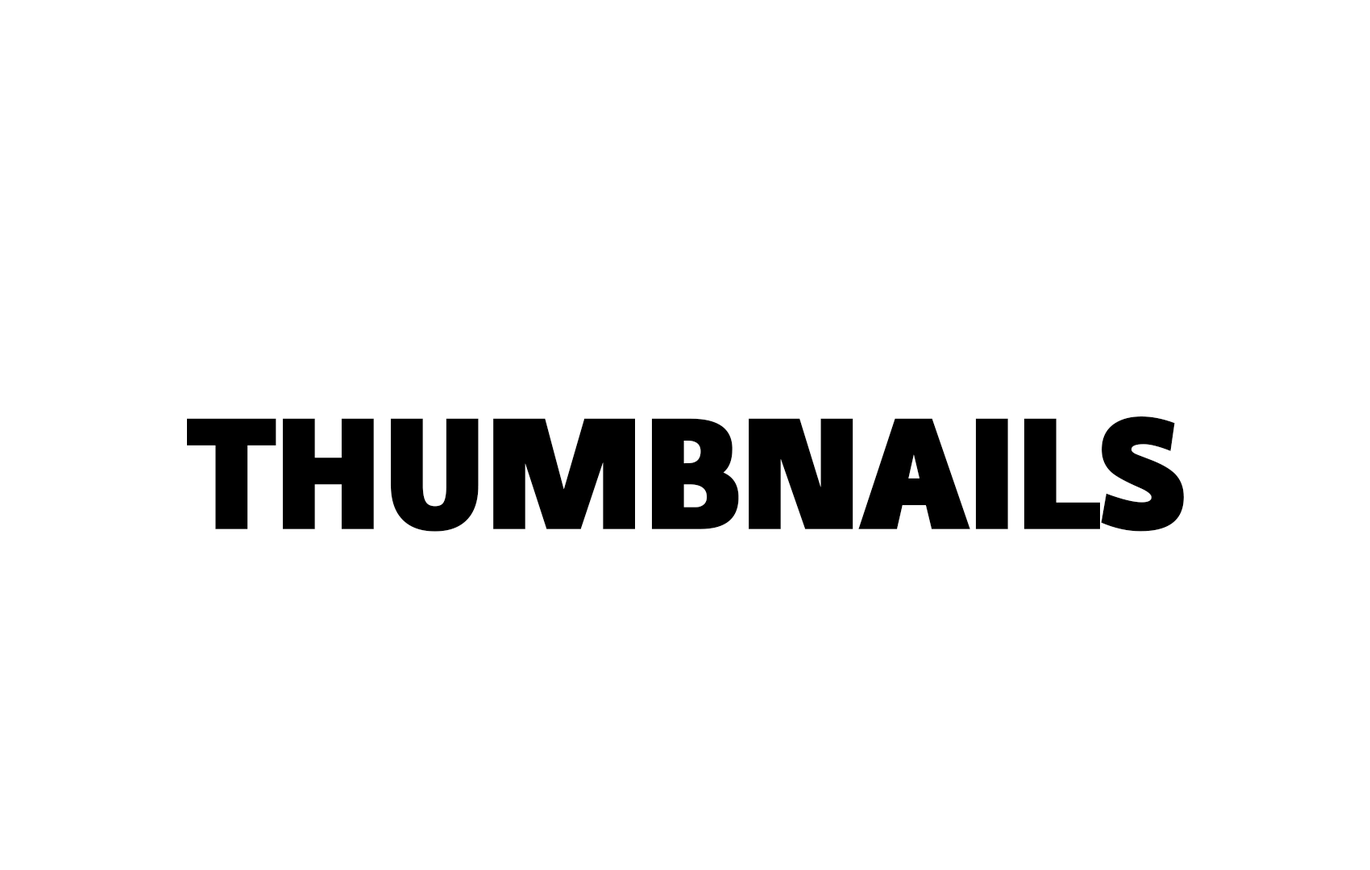
<style>
.page{position:relative;width:1370px;height:870px;background:#ffffff}
.page>*{position:absolute;margin:0}
.t1{font:135.7px "VIPHalaBold-VIPHalaBold";letter-spacing:-0.02em;color:#000000}
</style>
<div class="page">
<p class="t1" style="left:187px;top:417px;width:997px;height:115px">THUMBNAILS</p>
</div>
